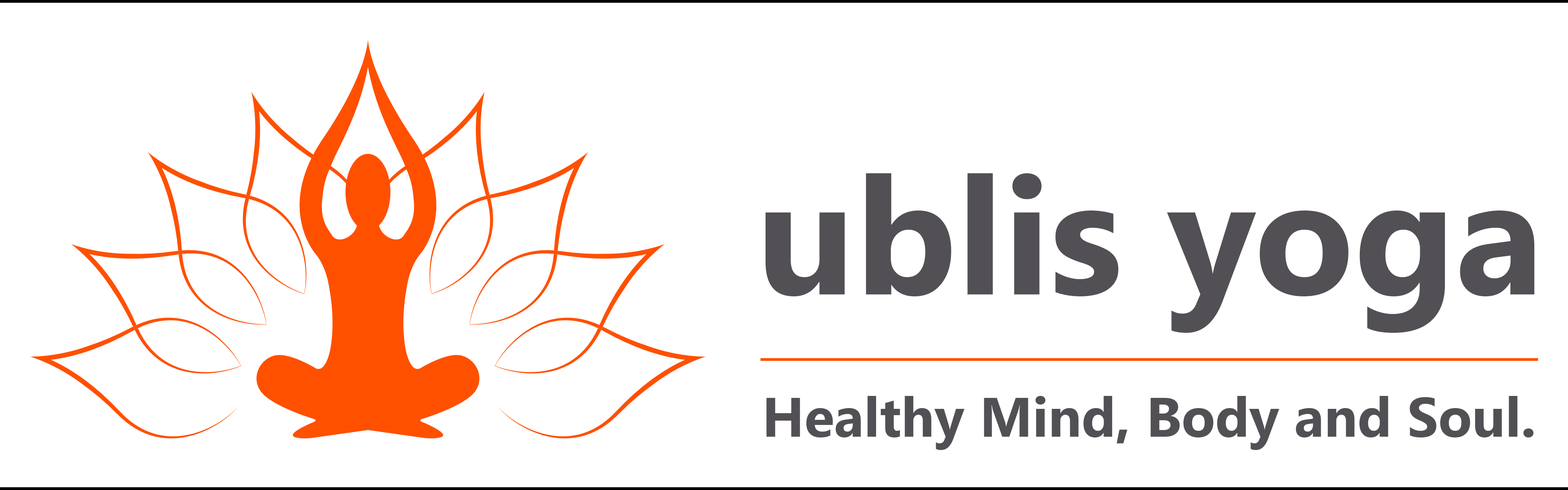
<style>
.page{position:relative;width:1568px;height:490px;background:#ffffff}
.page>*{position:absolute;margin:0}
.t1{font:163.9px "SegoeUI-Bold";color:#525054}
.t2{font:55.3px "SegoeUI-Bold";color:#525054}
</style>
<div class="page">
<p class="t1" style="left:765px;top:173px;width:770px;height:160px">ublis yoga</p>
<p class="t2" style="left:766px;top:396px;width:768px;height:54px">Healthy Mind, Body and Soul.</p>
</div>
